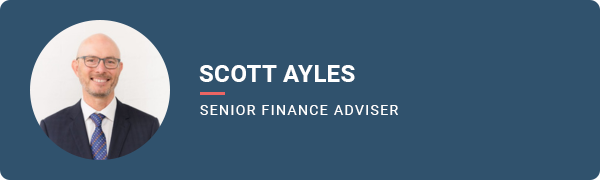
<style>
.page{position:relative;width:600px;height:180px;background:#30526d}
.page>*{position:absolute;margin:0}
.t1{font:24px "Roboto-Bold";letter-spacing:0.02em;color:#ffffff;text-transform:uppercase}
.t2{font:14px "Roboto-Regular";letter-spacing:0.1em;color:#ffffff;text-transform:uppercase}
</style>
<div class="page">
<p class="t1" style="left:199px;top:65px;width:156px;height:17px">Scott Ayles</p>
<p class="t2" style="left:200px;top:105px;width:198px;height:10px">Senior Finance Adviser</p>
</div>
